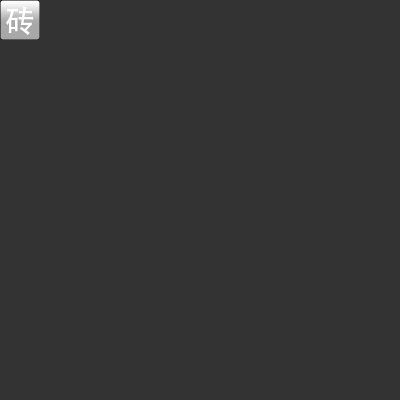
<style>
.page{position:relative;width:400px;height:400px;background:#333333}
.page>*{position:absolute;margin:0}
.t1{font:30px "AdobeHeitiStd-Regular";color:#ffffff}
</style>
<div class="page">
<p class="t1" style="left:6px;top:6px;width:28px;height:29px">砖</p>
</div>
